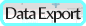
<style>
.page{position:relative;width:86px;height:26px;background:#77ffff}
.page>*{position:absolute;margin:0}
.t1{font:17.3px "AmiraParadiso";letter-spacing:-0.08em;color:#211f1f}
</style>
<div class="page">
<p class="t1" style="left:6px;top:7px;width:75px;height:16px">Data Export</p>
</div>
